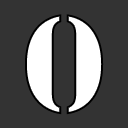
<style>
.page{position:relative;width:128px;height:128px;background:#333333}
.page>*{position:absolute;margin:0}
.t1{font:128px "StencilStd";color:#ffffff}
</style>
<div class="page">
<p class="t1" style="left:25px;top:14px;width:79px;height:101px">0</p>
</div>
